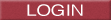
<style>
.page{position:relative;width:111px;height:20px}
.page>*{position:absolute;margin:0}
.t1{font:15.7px "Helvetica";color:#ffffff;scale:1.2 1}
</style>
<div class="page">
<p class="t1" style="left:27px;top:4px;width:56px;height:12px">LOGIN</p>
</div>
